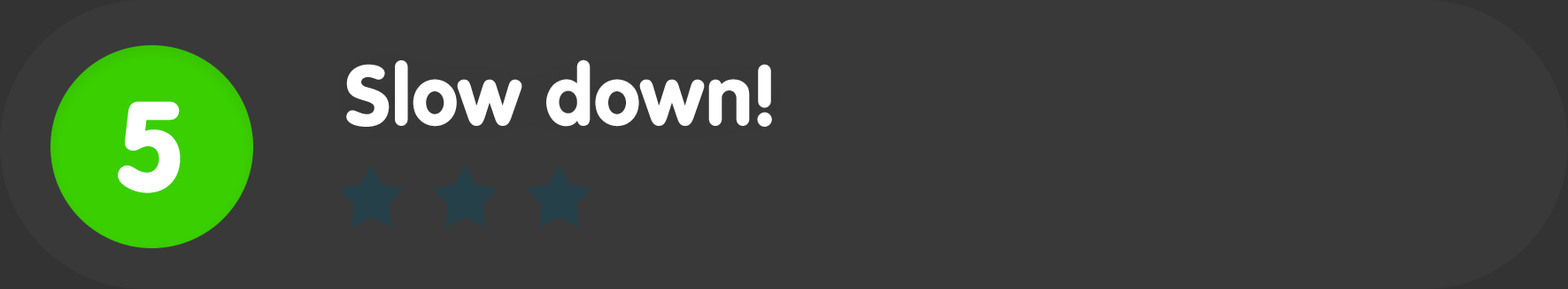
<style>
.page{position:relative;width:1568px;height:289px;background:#393939}
.page>*{position:absolute;margin:0}
.t1{font:88.5px "VAGRundschriftD";color:#ffffff}
.t2{font:132.8px "VAGRundschriftD";color:#ffffff}
</style>
<div class="page">
<p class="t1" style="left:346px;top:59px;width:426px;height:68px">Slow down!</p>
<p class="t2" style="left:118px;top:101px;width:63px;height:92px">5</p>
</div>
